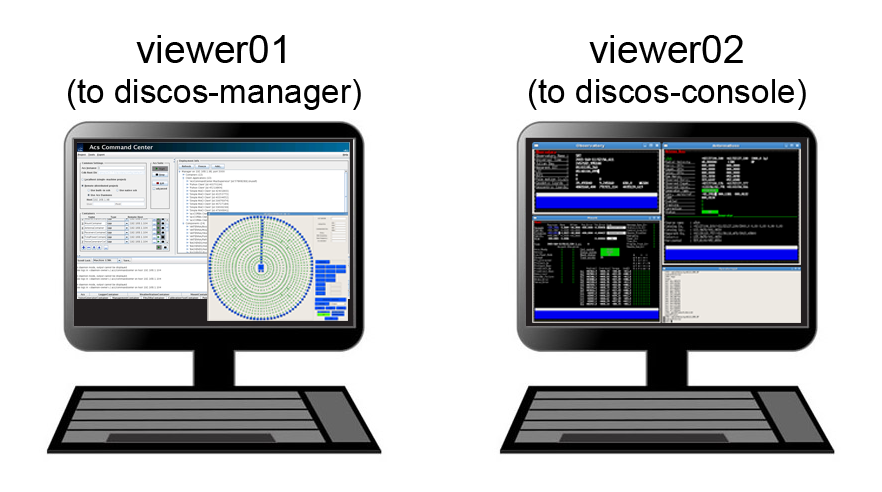
<style>
.page{position:relative;width:882px;height:492px;background:#ffffff}
.page>*{position:absolute;margin:0}
.t1{font:33.3px "ArialMT";color:#000000}
.t2{font:38.9px "ArialMT";color:#000000}
</style>
<div class="page">
<p class="t1" style="left:68px;top:35px;width:293px;height:75px;text-align:center"><span class="t2">viewer01<br></span>(to discos-manager)</p>
<p class="t1" style="left:529px;top:35px;width:277px;height:75px;text-align:center"><span class="t2">viewer02<br></span>(to discos-console)</p>
</div>
